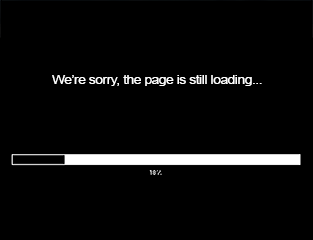
<style>
.page{position:relative;width:313px;height:240px;background:#000000}
.page>*{position:absolute;margin:0}
.t1{font:11.9px "ArialMT";letter-spacing:-0.025em;color:#ffffff;scale:1.14 1}
</style>
<div class="page">
<p class="t1" style="left:52px;top:75px;width:210px;height:11px">We’re sorry, the page is still loading...</p>
</div>
